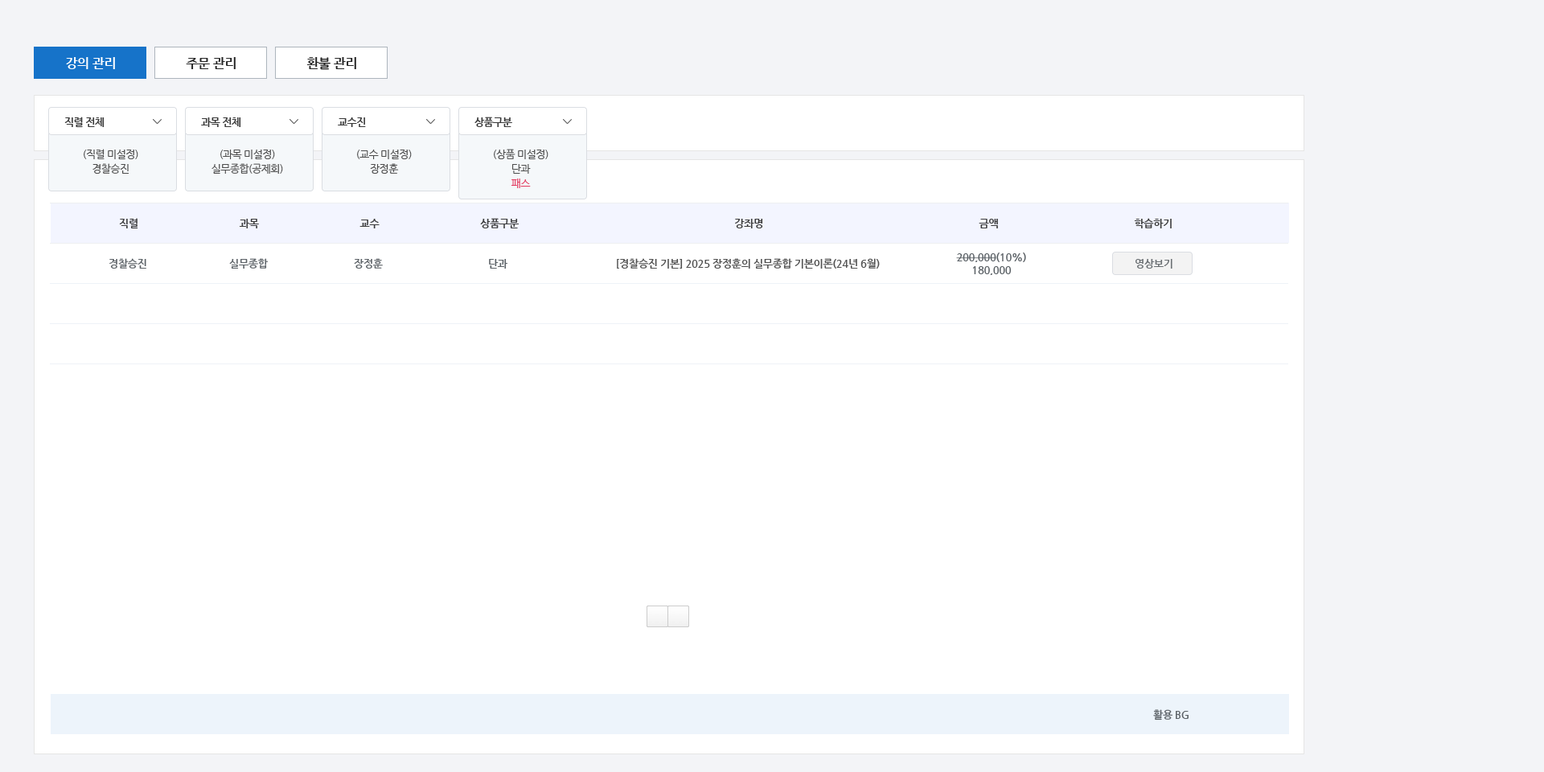
<style>
.page{position:relative;width:1544px;height:772px;background:#ffffff}
.page>*{position:absolute;margin:0}
.t1{font:12.9px "NanumGothicBold";letter-spacing:-0.025em;color:#ffffff}
.t2{font:12.9px "NanumGothicBold";letter-spacing:-0.025em;color:#252525}
.t3{font:10.5px "NanumGothicBold";letter-spacing:-0.05em;color:#383838}
.t4{font:10.5px/14.5px "NanumGothic";letter-spacing:-0.05em;color:#4c4c4c}
.t5{font:10.5px/14.5px "NanumGothic";letter-spacing:-0.05em;color:#e2385d}
.t6{font:10.5px "NanumGothicBold";letter-spacing:-0.025em;color:#3c3c3c}
.t7{font:10.5px "NanumGothicBold";letter-spacing:-0.025em;color:#5c6267}
.t8{font:10.5px "NanumGothicBold";letter-spacing:-0.025em;color:#515151}
.t9{font:10.5px "NanumGothicBold";letter-spacing:-0.025em}
.t10{font:10.5px "NanumGothicBold";letter-spacing:-0.025em;color:#6b7074}
</style>
<div class="page">
<p class="t1" style="left:66px;top:57px;width:49px;height:12px">강의 관리</p>
<p class="t2" style="left:186px;top:57px;width:50px;height:12px">주문 관리</p>
<p class="t2" style="left:306px;top:57px;width:50px;height:13px">환불 관리</p>
<p class="t3" style="left:64px;top:117px;width:41px;height:11px">직렬 전체</p>
<p class="t3" style="left:201px;top:117px;width:40px;height:10px">과목 전체</p>
<p class="t3" style="left:338px;top:117px;width:28px;height:10px">교수진</p>
<p class="t3" style="left:475px;top:117px;width:37px;height:10px">상품구분</p>
<p class="t4" style="left:84px;top:149px;width:54px;height:25px;text-align:center">(직렬 미설정)<br>경찰승진</p>
<p class="t4" style="left:212px;top:150px;width:71px;height:24px;text-align:center">(과목 미설정)<br>실무종합(공제회)</p>
<p class="t4" style="left:357px;top:150px;width:55px;height:24px;text-align:center">(교수 미설정)<br>장정훈</p>
<p class="t4" style="left:494px;top:149px;width:55px;height:39px;text-align:center">(상품 미설정)<br>단과<br><span class="t5">패스</span></p>
<p class="t6" style="left:119px;top:218px;width:1053px;height:11px">직렬                                      과목                                      교수                                      상품구분                                                                                 강좌명                                                                                 금액                                                   학습하기</p>
<p class="t7" style="left:956px;top:253px;width:70px;height:22px;text-align:center">200,000(10%)<br>180,000</p>
<p class="t7" style="left:109px;top:258px;width:37px;height:11px">경찰승진</p>
<p class="t7" style="left:229px;top:258px;width:39px;height:11px">실무종합</p>
<p class="t7" style="left:354px;top:258px;width:29px;height:11px">장정훈</p>
<p class="t7" style="left:489px;top:259px;width:19px;height:10px">단과</p>
<p class="t8" style="left:617px;top:258px;width:263px;height:11px">[경찰승진 기본] 2025 장정훈의 실무종합 기본이론(24년 6월)</p>
<p class="t9" style="left:1135px;top:259px;width:37px;height:10px">영상보기</p>
<p class="t10" style="left:1136px;top:259px;width:37px;height:10px">영상보기</p>
<p class="t7" style="left:1153px;top:709px;width:36px;height:12px">활용 BG</p>
</div>
